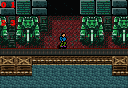
<style>
.page{position:relative;width:128px;height:96px}
.page>*{position:absolute;margin:0}
.t1{font:8px/18px "Rockwell-ExtraBold";color:#ff0000;text-transform:uppercase}
</style>
<div class="page">
<p class="t1" style="left:1px;top:1px;width:15px;height:25px">0  1<br>2  3</p>
</div>
